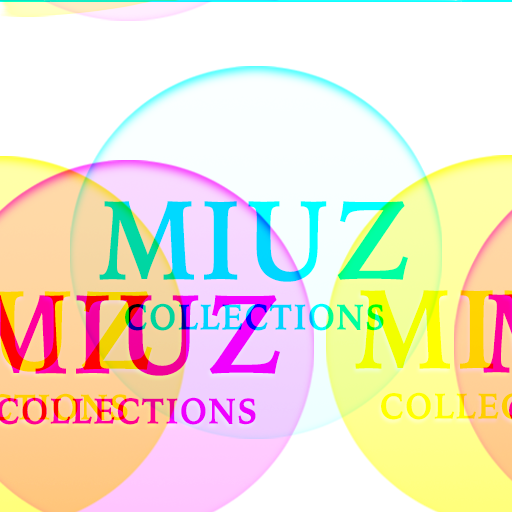
<style>
.page{position:relative;width:512px;height:512px;background:#ffffff}
.page>*{position:absolute;margin:0}
.t1{font:112.2px "IowanOldStyle-Bold";letter-spacing:0.025em;text-transform:uppercase;font-weight:bold;scale:0.91 1}
.t2{font:35.5px "IowanOldStyle-Bold";letter-spacing:0.025em;text-transform:uppercase;font-weight:bold;scale:0.91 1}
</style>
<div class="page">
<p class="t1" style="left:99px;top:199px;width:309px;height:81px">MIUZ</p>
<p class="t2" style="left:125px;top:301px;width:259px;height:28px">collections</p>
</div>
